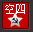
<style>
.page{position:relative;width:33px;height:32px;background:#c50000}
.page>*{position:absolute;margin:0}
.t1{font:10.8px "SimSun";color:#ffffff}
</style>
<div class="page">
<p class="t1" style="left:5px;top:4px;width:20px;height:10px">空四</p>
</div>
